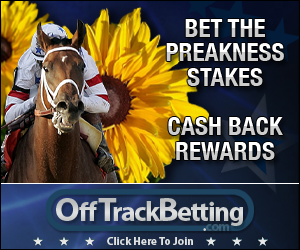
<style>
.page{position:relative;width:300px;height:250px}
.page>*{position:absolute;margin:0}
.t1{font:25px "HelveticaNeue-CondensedBold"}
.t2{font:27.4px "MyriadPro-Bold";letter-spacing:-0.05em;color:#e0e2e2}
.t3{font:34.2px "MyriadPro-Bold";color:#e0e2e2}
.t4{font:27.4px "MyriadPro-Bold";letter-spacing:0.05em;color:#e0e2e2}
.t5{font:34.2px "MyriadPro-Bold";letter-spacing:-0.15em;color:#e0e2e2}
.t6{font:34.2px "MyriadPro-Bold";letter-spacing:-0.05em;color:#e0e2e2}
.t7{font:13.5px "MyriadPro-Bold";letter-spacing:-0.05em;color:#3e647e}
.t8{font:13.5px "MyriadPro-Bold";letter-spacing:-0.05em;color:#ffffff}
.t9{font:11.2px "MyriadPro-Bold";color:#e0e2e2}
</style>
<div class="page">
<p class="t1" style="left:185px;top:16px;width:80px;height:27px">BET THE</p>
<p class="t1" style="left:166px;top:40px;width:118px;height:27px">PREAKNESS</p>
<p class="t1" style="left:187px;top:65px;width:76px;height:27px">STAKES</p>
<p class="t1" style="left:168px;top:114px;width:115px;height:27px">CASH BACK</p>
<p class="t1" style="left:175px;top:139px;width:100px;height:27px">REWARDS</p>
<p class="t2" style="left:56px;top:198px;width:187px;height:28px"><span class="t3">O</span><span class="t4">ff</span><span class="t5">T</span>rack<span class="t6">B</span>etting</p>
<p class="t7" style="left:203px;top:224px;width:26px;height:7px"><span class="t8">.</span>com</p>
<p class="t9" style="left:107px;top:236px;width:87px;height:12px">Click Here To Join</p>
</div>
